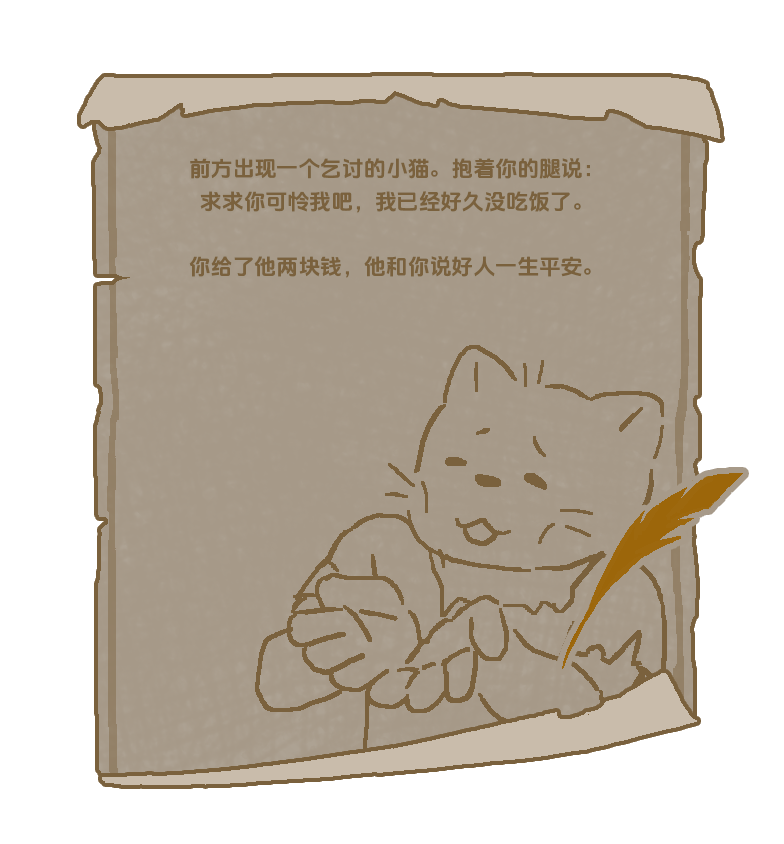
<style>
.page{position:relative;width:784px;height:844px;background:#ffffff}
.page>*{position:absolute;margin:0}
.t1{font:21.7px/32.7px "DOUYINSANSBOLD-GB";letter-spacing:0.01em;color:#7a613d;text-transform:uppercase}
</style>
<div class="page">
<p class="t1" style="left:189px;top:158px;width:402px;height:120px;text-align:center">前方出现一个乞讨的小猫。抱着你的腿说：<br>求求你可怜我吧，我已经好久没吃饭了。<br><br>你给了他两块钱，他和你说好人一生平安。</p>
</div>
